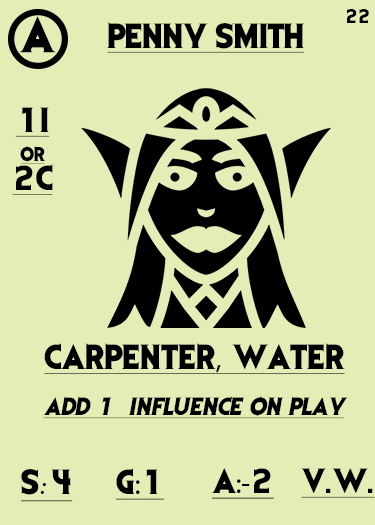
<style>
.page{position:relative;width:375px;height:525px;background:#e3edb5}
.page>*{position:absolute;margin:0}
.t1{font:41.7px "EvilDead";letter-spacing:-0.05em;color:#000000}
.t2{font:16.7px "EvilDead";letter-spacing:-0.05em;color:#000000}
.t3{font:29.2px "EvilDead";letter-spacing:-0.025em;color:#000000;text-decoration:underline}
.t4{font:29.2px/29.2px "EvilDead";color:#000000;text-decoration:underline}
.t5{font:16.7px/29.2px "EvilDead";color:#000000;text-decoration:underline}
.t6{font:29.2px "EvilDead";color:#000000;text-decoration:underline}
.t7{font:29.2px "MyriadPro-Regular";color:#000000;text-decoration:underline}
.t8{font:20.8px "EvilDead";color:#000000;font-style:italic;text-decoration:underline}
.t9{font:29.2px "Fadli-Script";color:#000000;text-decoration:underline}
</style>
<div class="page">
<p class="t1" style="left:19px;top:16px;width:37px;height:37px">A</p>
<p class="t2" style="left:347px;top:9px;width:22px;height:14px">22</p>
<p class="t3" style="left:107px;top:22px;width:197px;height:31px">PENNY SMITH</p>
<p class="t4" style="left:12px;top:107px;width:41px;height:88px;text-align:center">1I<br><span class="t5">or<br></span>2C</p>
<p class="t6" style="left:44px;top:343px;width:301px;height:31px">CARPENTER<span class="t7">,</span> WATER</p>
<p class="t8" style="left:43px;top:396px;width:305px;height:23px">Add 1  influence on play</p>
<p class="t6" style="left:21px;top:469px;width:52px;height:33px">S<span class="t9">:</span>4</p>
<p class="t6" style="left:116px;top:468px;width:49px;height:32px">G<span class="t7">:</span>1</p>
<p class="t7" style="left:211px;top:468px;width:63px;height:31px"><span class="t6">A</span>:-<span class="t6">2</span></p>
<p class="t6" style="left:301px;top:468px;width:74px;height:30px">V.W.</p>
</div>
